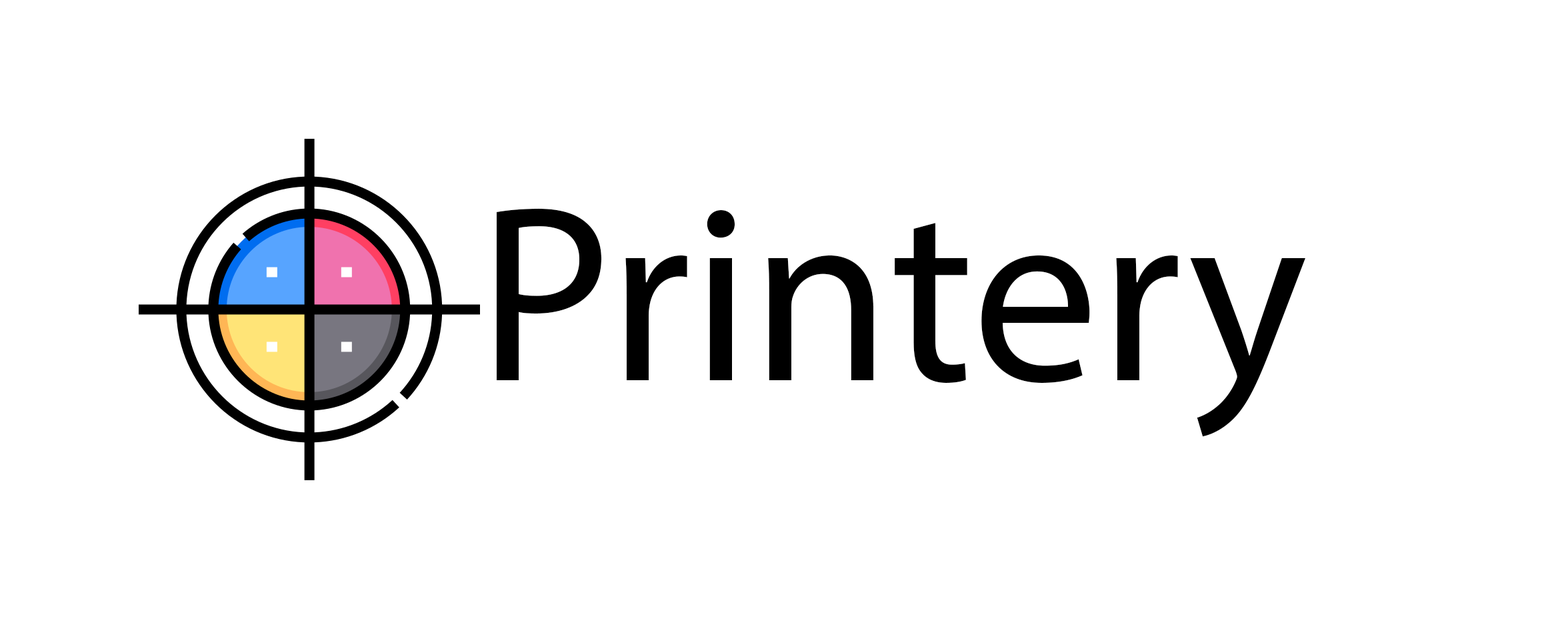
<style>
.page{position:relative;width:1568px;height:619px;background:#ffffff}
.page>*{position:absolute;margin:0}
.t1{font:252.7px "MyriadPro-Regular";color:#000000}
</style>
<div class="page">
<p class="t1" style="left:497px;top:208px;width:808px;height:229px">Printery</p>
</div>
